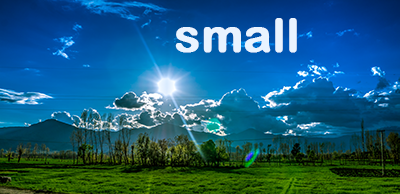
<style>
.page{position:relative;width:400px;height:194px}
.page>*{position:absolute;margin:0}
.t1{font:46.7px "ArialRoundedMTBold";color:#e9f3ff;font-weight:bold}
</style>
<div class="page">
<p class="t1" style="left:175px;top:18px;width:122px;height:35px">small</p>
</div>
